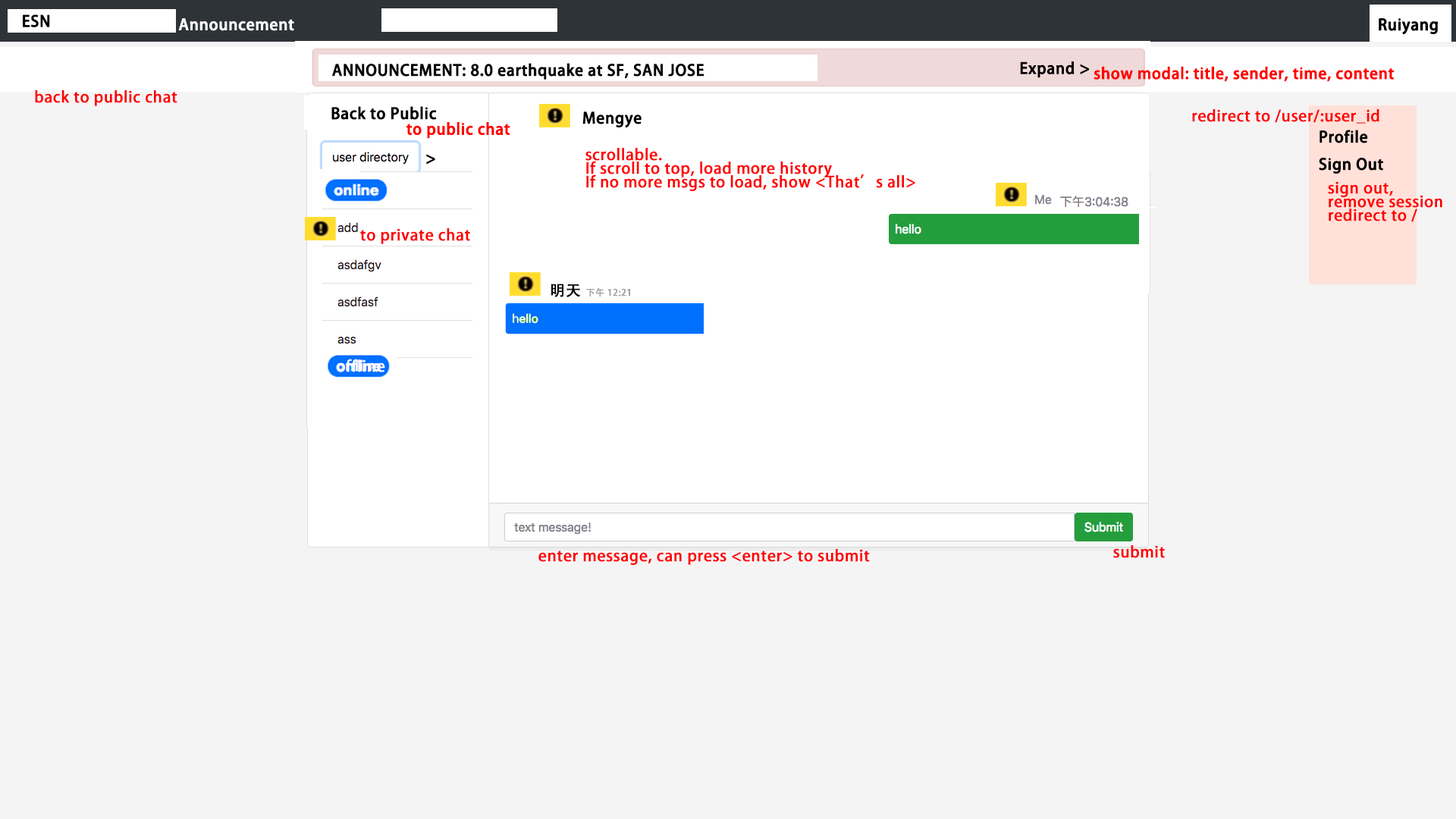
<style>
.page{position:relative;width:1456px;height:819px;background:#f5f4f5}
.page>*{position:absolute;margin:0}
.t1{font:15.2px "AdobeHeitiStd-Regular";letter-spacing:0.02em;color:#000000;font-weight:bold}
.t2{font:15.2px "AdobeHeitiStd-Regular";letter-spacing:0.02em;color:#ffffff;font-weight:bold}
.t3{font:15.2px "AdobeHeitiStd-Regular";letter-spacing:0.02em;color:#ff0000;font-weight:bold}
.t4{font:15.2px/13.6px "AdobeHeitiStd-Regular";letter-spacing:0.02em;color:#000000;font-weight:bold}
.t5{font:15.2px/13.6px "AdobeHeitiStd-Regular";letter-spacing:0.02em;color:#ff0000;font-weight:bold}
.t6{font:9.1px "AdobeHeitiStd-Regular";letter-spacing:0.02em;color:#a2a2a2;font-weight:bold}
</style>
<div class="page">
<p class="t1" style="left:23px;top:14px;width:27px;height:13px">ESN</p>
<p class="t2" style="left:178px;top:18px;width:116px;height:13px">Announcement</p>
<p class="t1" style="left:332px;top:63px;width:372px;height:17px">ANNOUNCEMENT: 8.0 earthquake at SF, SAN JOSE</p>
<p class="t1" style="left:1020px;top:61px;width:69px;height:17px">Expand &gt;</p>
<p class="t3" style="left:1094px;top:66px;width:300px;height:16px">show modal: title, sender, time, content</p>
<p class="t3" style="left:35px;top:90px;width:142px;height:16px">back to public chat</p>
<p class="t1" style="left:331px;top:106px;width:106px;height:14px">Back to Public</p>
<p class="t1" style="left:582px;top:111px;width:60px;height:17px">Mengye</p>
<p class="t3" style="left:1192px;top:109px;width:187px;height:15px">redirect to /user/:user_id</p>
<p class="t3" style="left:406px;top:122px;width:104px;height:17px">to public chat</p>
<p class="t4" style="left:1319px;top:130px;width:64px;height:44px">Profile<br><br>Sign Out</p>
<p class="t5" style="left:585px;top:148px;width:330px;height:43px">scrollable. <br>If scroll to top, load more history<br>If no more msgs to load, show &lt;That’s all&gt;</p>
<p class="t1" style="left:426px;top:154px;width:9px;height:11px">&gt;</p>
<p class="t5" style="left:1328px;top:181px;width:114px;height:41px">sign out,<br>remove session<br>redirect to /</p>
<p class="t3" style="left:360px;top:228px;width:110px;height:16px">to private chat</p>
<p class="t6" style="left:551px;top:284px;width:79px;height:13px"><span class="t1">明天 </span>下午 12:21</p>
<p class="t2" style="left:337px;top:359px;width:48px;height:13px">offline</p>
<p class="t3" style="left:1113px;top:545px;width:52px;height:13px">submit</p>
<p class="t3" style="left:538px;top:549px;width:332px;height:16px">enter message, can press &lt;enter&gt; to submit</p>
</div>
